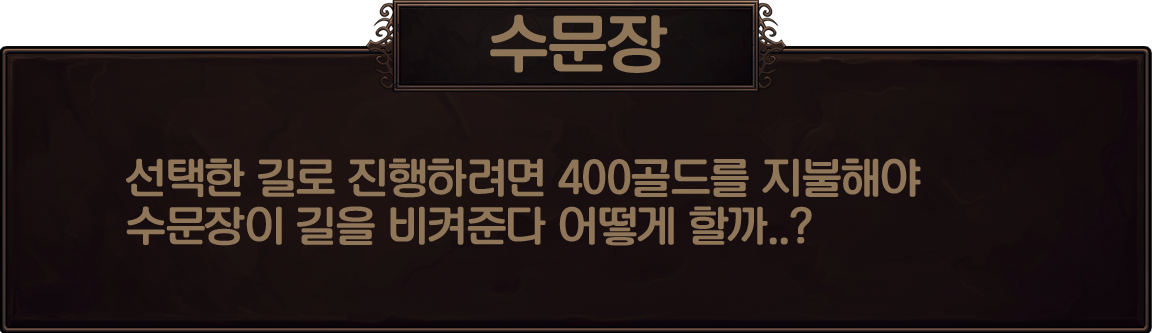
<style>
.page{position:relative;width:1152px;height:333px}
.page>*{position:absolute;margin:0}
.t1{font:60px "KoreanNGL3-R";color:#907659}
.t2{font:40px "KoreanNGL3-R";color:#907659}
</style>
<div class="page">
<p class="t1" style="left:490px;top:14px;width:178px;height:59px">수문장</p>
<p class="t2" style="left:126px;top:158px;width:795px;height:88px">선택한 길로 진행하려면 400골드를 지불해야<br>수문장이 길을 비켜준다 어떻게 할까..?</p>
</div>
